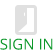
<style>
.page{position:relative;width:53px;height:50px;background:#ffffff}
.page>*{position:absolute;margin:0}
.t1{font:15px "OpenSans";color:#0d982a}
</style>
<div class="page">
<p class="t1" style="left:0px;top:38px;width:53px;height:12px">SIGN IN</p>
</div>
